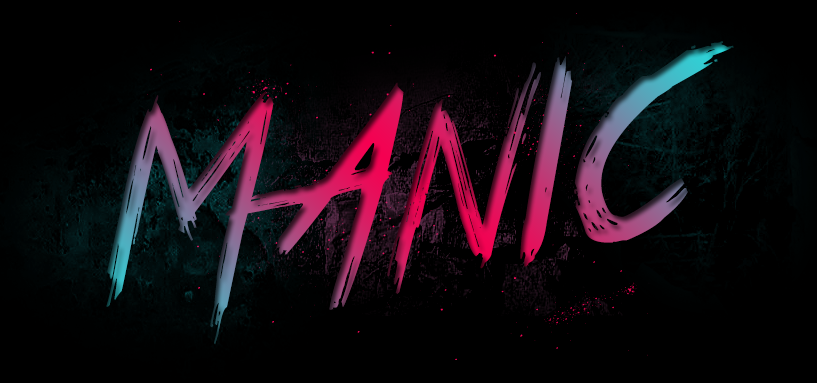
<style>
.page{position:relative;width:817px;height:383px;background:#000000}
.page>*{position:absolute;margin:0}
.t1{font:190px "TrueLies";letter-spacing:-0.01em}
.t2{font:245px "TrueLies";letter-spacing:-0.01em}
.t3{font:200px "TrueLies";letter-spacing:-0.01em}
.t4{font:170px "TrueLies";letter-spacing:-0.01em}
</style>
<div class="page">
<p class="t1" style="left:106px;top:41px;width:628px;height:304px;rotate:-12deg"><span class="t2">M</span><span class="t3">A</span>NI<span class="t4">C</span></p>
</div>
